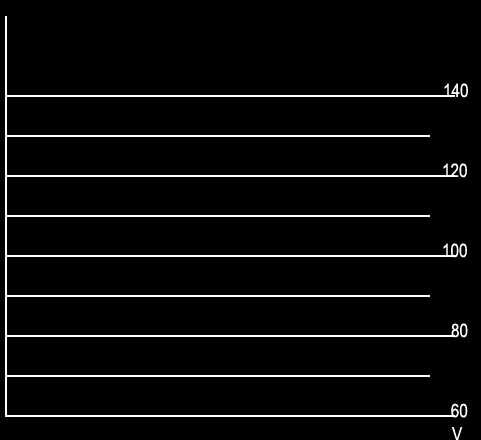
<style>
.page{position:relative;width:481px;height:440px;background:#000000}
.page>*{position:absolute;margin:0}
.t1{font:18.7px "ArialNarrow";color:#ffffff}
</style>
<div class="page">
<p class="t1" style="left:444px;top:83px;width:24px;height:15px">140</p>
<p class="t1" style="left:443px;top:163px;width:24px;height:15px">120</p>
<p class="t1" style="left:443px;top:243px;width:24px;height:15px">100</p>
<p class="t1" style="left:451px;top:323px;width:17px;height:15px">80</p>
<p class="t1" style="left:451px;top:403px;width:17px;height:15px">60</p>
<p class="t1" style="left:452px;top:427px;width:11px;height:14px">V</p>
</div>
